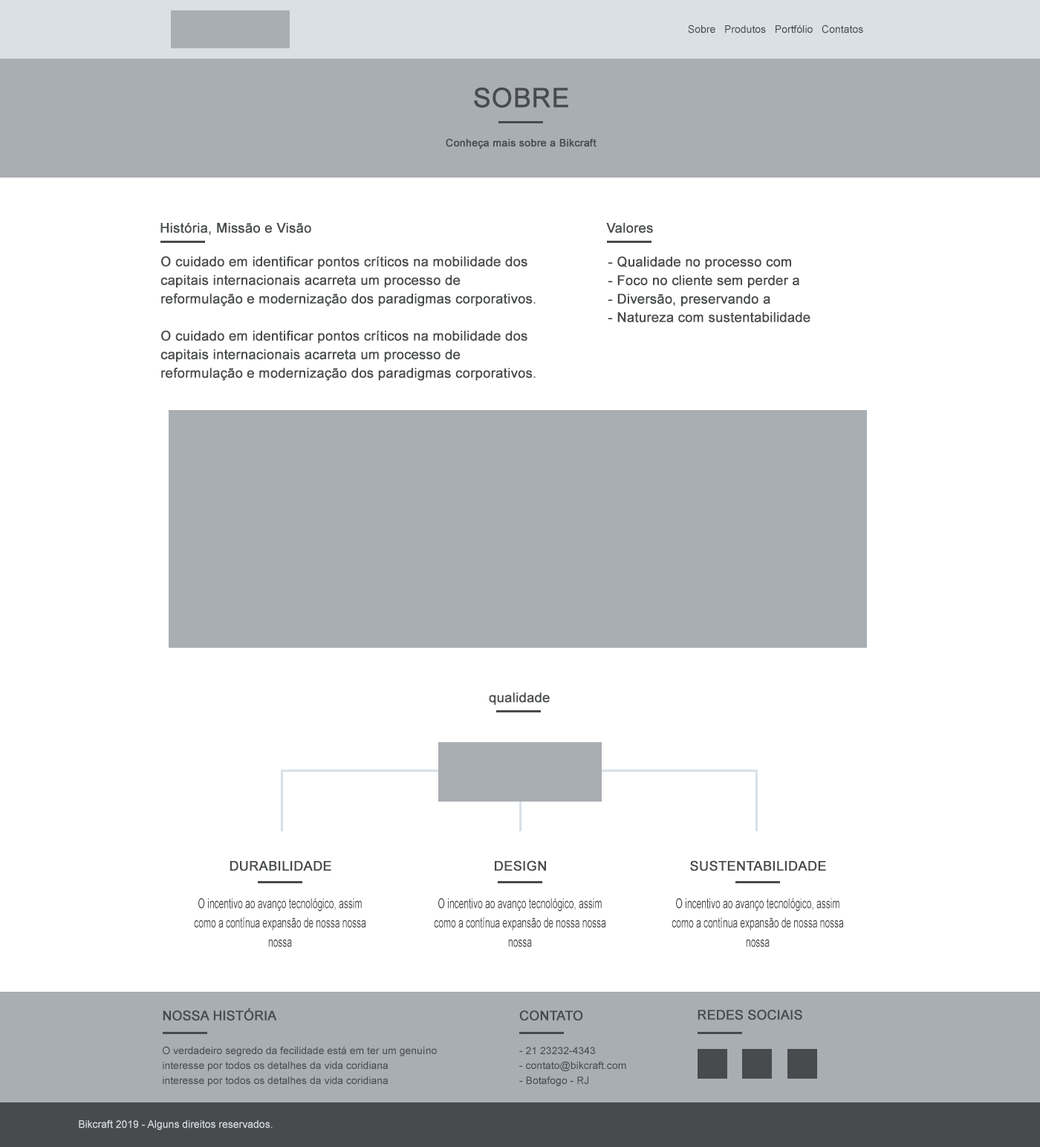
<style>
.page{position:relative;width:1040px;height:1147px;background:#ffffff}
.page>*{position:absolute;margin:0}
.t1{font:10.7px "ArialMT";color:#484b4d}
.t2{font:26.8px "ArialMT";color:#484b4d;text-transform:uppercase;font-weight:bold}
.t3{font:10.4px "ArialMT";color:#484b4d;font-weight:bold}
.t4{font:13.4px "ArialMT";color:#484b4d;font-weight:bold}
.t5{font:13.4px/18.6px "ArialMT";color:#484b4d;font-weight:bold}
.t6{font:13.3px "ArialMT";color:#484b4d;font-weight:bold}
.t7{font:13.2px "ArialMT";color:#484b4d;font-weight:bold}
.t8{font:13.5px/19.3px "ArialMT";color:#484b4d;scale:0.66 1}
.t9{font:13.2px "ArialMT";color:#484b4d;text-transform:uppercase;font-weight:bold}
.t10{font:10.4px/14.9px "ArialMT";color:#484b4d}
.t11{font:10.7px "ArialMT";color:#d9e0e6}
</style>
<div class="page">
<p class="t1" style="left:688px;top:25px;width:175px;height:8px">Sobre   Produtos   Portfólio   Contatos</p>
<p class="t2" style="left:474px;top:87px;width:94px;height:21px">sobre</p>
<p class="t3" style="left:446px;top:138px;width:150px;height:11px">Conheça mais sobre a Bikcraft</p>
<p class="t4" style="left:160px;top:223px;width:151px;height:12px">História, Missão e Visão</p>
<p class="t4" style="left:606px;top:223px;width:47px;height:10px">Valores</p>
<p class="t5" style="left:160px;top:256px;width:376px;height:125px">O cuidado em identificar pontos críticos na mobilidade dos capitais internacionais acarreta um processo de reformulação e modernização dos paradigmas corporativos.<br><br>O cuidado em identificar pontos críticos na mobilidade dos capitais internacionais acarreta um processo de reformulação e modernização dos paradigmas corporativos.</p>
<p class="t5" style="left:608px;top:256px;width:202px;height:66px">- Qualidade no processo com<br>- Foco no cliente sem perder a<br>- Diversão, preservando a <br>- Natureza com sustentabilidade</p>
<p class="t6" style="left:489px;top:692px;width:61px;height:13px">qualidade</p>
<p class="t7" style="left:230px;top:861px;width:101px;height:10px">DURABILIDADE</p>
<p class="t7" style="left:495px;top:860px;width:51px;height:11px">DESIGN</p>
<p class="t7" style="left:690px;top:860px;width:136px;height:11px">SUSTENTABILIDADE</p>
<p class="t8" style="left:194px;top:898px;width:172px;height:49px;text-align:center">O incentivo ao avanço tecnológico, assim como a contínua expansão de nossa nossa nossa</p>
<p class="t8" style="left:434px;top:898px;width:172px;height:49px;text-align:center">O incentivo ao avanço tecnológico, assim como a contínua expansão de nossa nossa nossa</p>
<p class="t8" style="left:671px;top:898px;width:173px;height:49px;text-align:center">O incentivo ao avanço tecnológico, assim como a contínua expansão de nossa nossa nossa</p>
<p class="t9" style="left:163px;top:1008px;width:114px;height:13px">Nossa História</p>
<p class="t9" style="left:519px;top:1010px;width:64px;height:11px">contato</p>
<p class="t9" style="left:697px;top:1009px;width:105px;height:11px">redes sociais</p>
<p class="t10" style="left:163px;top:1046px;width:274px;height:40px">O verdadeiro segredo da fecilidade está em ter um genuíno interesse por todos os detalhes da vida coridiana<br>interesse por todos os detalhes da vida coridiana</p>
<p class="t10" style="left:519px;top:1047px;width:107px;height:39px">- 21 23232-4343<br>- contato@bikcraft.com<br>- Botafogo - RJ</p>
<p class="t11" style="left:79px;top:1120px;width:194px;height:10px">Bikcraft 2019 - Alguns direitos reservados.</p>
</div>
